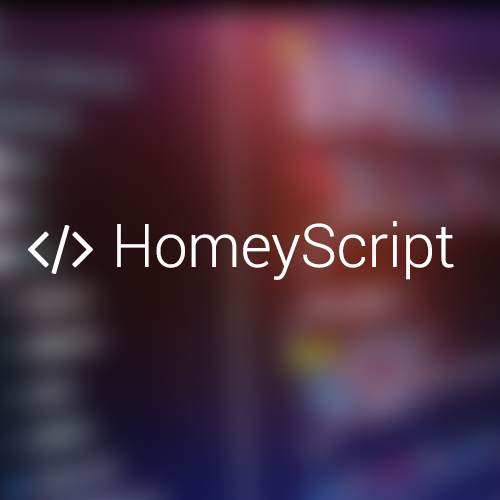
<style>
.page{position:relative;width:500px;height:500px}
.page>*{position:absolute;margin:0}
.t1{font:60px "Roboto-Light";color:#ffffff}
</style>
<div class="page">
<p class="t1" style="left:117px;top:221px;width:337px;height:59px">HomeyScript</p>
</div>
